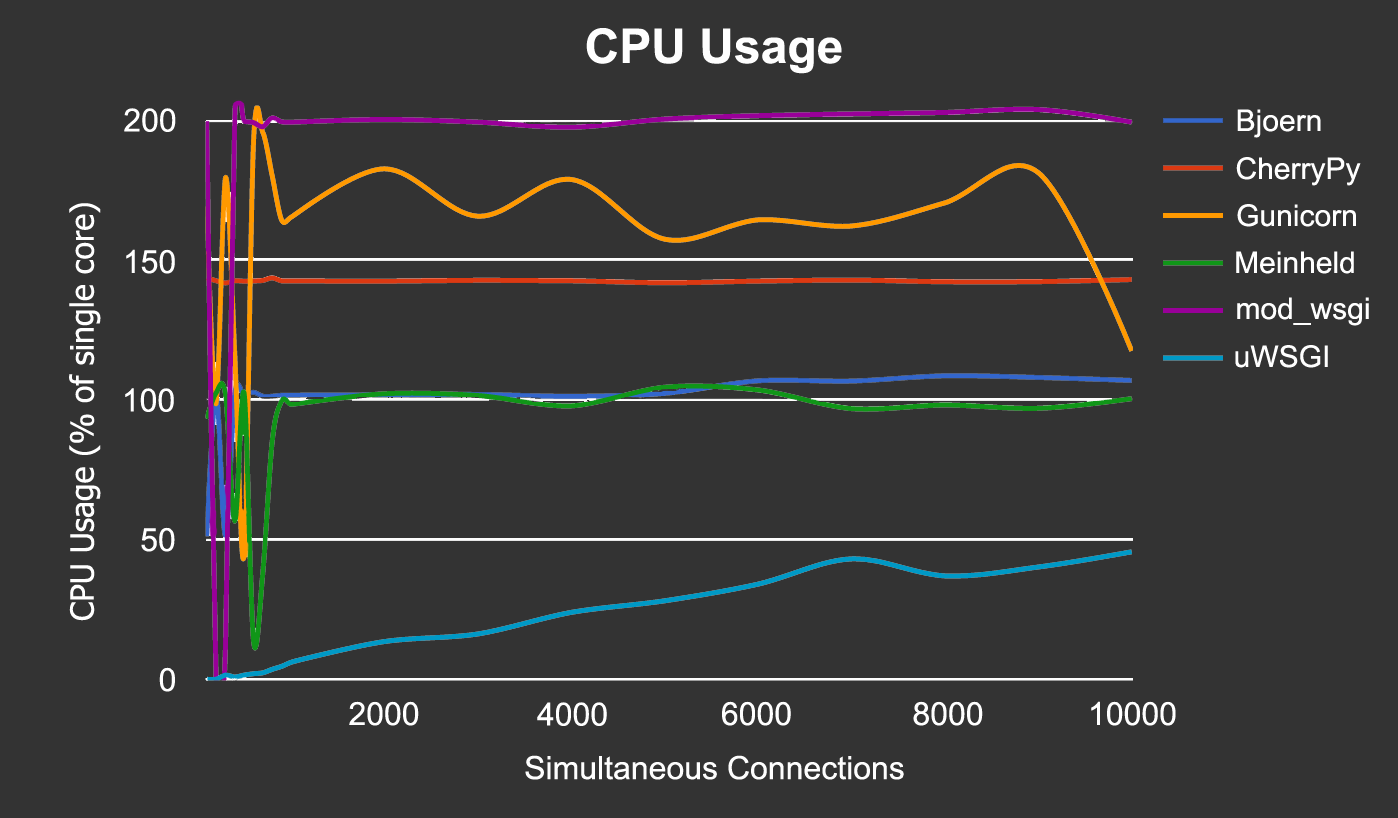
<style>
.page{position:relative;width:1398px;height:818px;background:#333333}
.page>*{position:absolute;margin:0}
.t1{font:48px "Arial-BoldMT";color:#fefefe}
.t2{font:32px "ArialMT";color:#ffffff}
.t3{font:30px "ArialMT";color:#ffffff}
.t4{font:32px "Tahoma";color:#ffffff}
.t5{font:32px "ArialMT";color:#fefefe}
</style>
<div class="page">
<p class="t1" style="left:586px;top:28px;width:256px;height:46px">CPU Usage</p>
<p class="t2" style="left:124px;top:108px;width:52px;height:24px">200</p>
<p class="t3" style="left:1237px;top:109px;width:84px;height:29px">Bjoern</p>
<p class="t3" style="left:1236px;top:157px;width:125px;height:29px">CherryPy</p>
<p class="t4" style="left:69px;top:203px;width:32px;height:418px;rotate:-90deg">CPU Usage (% of single core)</p>
<p class="t3" style="left:1237px;top:204px;width:119px;height:23px">Gunicorn</p>
<p class="t2" style="left:126px;top:249px;width:49px;height:25px">150</p>
<p class="t3" style="left:1236px;top:251px;width:118px;height:23px">Meinheld</p>
<p class="t3" style="left:1237px;top:297px;width:132px;height:29px">mod_wsgi</p>
<p class="t3" style="left:1235px;top:345px;width:93px;height:23px">uWSGI</p>
<p class="t2" style="left:125px;top:388px;width:49px;height:24px">100</p>
<p class="t2" style="left:141px;top:527px;width:34px;height:25px">50</p>
<p class="t2" style="left:159px;top:667px;width:16px;height:25px">0</p>
<p class="t2" style="left:349px;top:701px;width:70px;height:25px">2000</p>
<p class="t2" style="left:537px;top:702px;width:70px;height:24px">4000</p>
<p class="t2" style="left:722px;top:701px;width:69px;height:25px">6000</p>
<p class="t2" style="left:913px;top:701px;width:70px;height:25px">8000</p>
<p class="t2" style="left:1091px;top:701px;width:85px;height:25px">10000</p>
<p class="t5" style="left:525px;top:755px;width:379px;height:25px">Simultaneous Connections</p>
</div>
